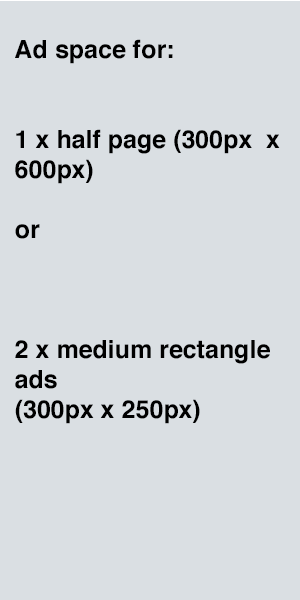
<style>
.page{position:relative;width:300px;height:600px;background:#dadfe3}
.page>*{position:absolute;margin:0}
.t1{font:25px "Helvetica-Bold";color:#000000}
</style>
<div class="page">
<p class="t1" style="left:15px;top:39px;width:265px;height:385px">Ad space for:<br><br><br>1 x half page (300px  x 600px)<br><br>or <br><br><br><br>2 x medium rectangle ads <br>(300px x 250px)</p>
</div>
